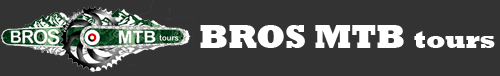
<style>
.page{position:relative;width:500px;height:76px;background:#333333}
.page>*{position:absolute;margin:0}
.t1{font:33.5px "Rockwell-ExtraBold";color:#ffffff}
.t2{font:25.6px "Rockwell-ExtraBold";color:#ffffff}
</style>
<div class="page">
<p class="t1" style="left:200px;top:25px;width:204px;height:23px">BROS MTB</p>
<p class="t2" style="left:414px;top:31px;width:81px;height:17px">tours</p>
</div>
